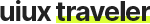
<style>
.page{position:relative;width:150px;height:24px;background:#ffffff}
.page>*{position:absolute;margin:0}
.t1{font:26.9px "Interop-Bold";letter-spacing:-0.045em;color:#222222}
</style>
<div class="page">
<p class="t1" style="left:0px;top:0px;width:151px;height:21px">uiux traveler</p>
</div>
